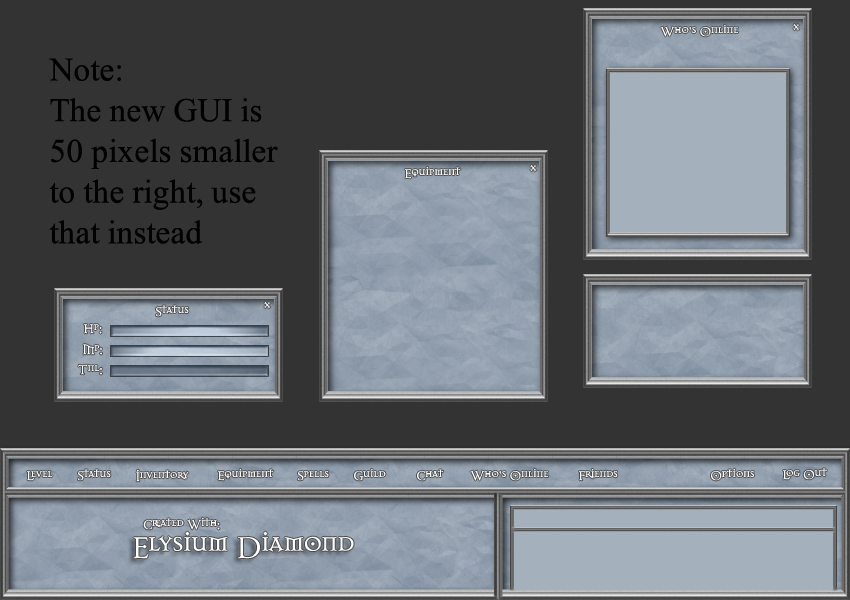
<style>
.page{position:relative;width:850px;height:600px;background:#333333}
.page>*{position:absolute;margin:0}
.t1{font:14px "Dark11";color:#ffffff}
.t2{font:33.2px/40.7px "TimesNewRomanPSMT";color:#000000}
.t3{font:33.2px "Dark11";color:#ffffff}
</style>
<div class="page">
<p class="t1" style="left:660px;top:24px;width:79px;height:13px">Who’s Online</p>
<p class="t1" style="left:793px;top:23px;width:7px;height:8px">x</p>
<p class="t2" style="left:49px;top:58px;width:229px;height:186px">Note:<br>The new GUI is<br>50 pixels smaller<br>to the right, use<br>that instead</p>
<p class="t1" style="left:405px;top:166px;width:56px;height:13px">Equipment</p>
<p class="t1" style="left:530px;top:164px;width:7px;height:8px">x</p>
<p class="t1" style="left:156px;top:305px;width:33px;height:12px">Status</p>
<p class="t1" style="left:264px;top:301px;width:7px;height:8px">x</p>
<p class="t1" style="left:84px;top:324px;width:18px;height:10px">Hp:</p>
<p class="t1" style="left:83px;top:344px;width:19px;height:11px">Mp:</p>
<p class="t1" style="left:78px;top:364px;width:24px;height:11px">Tnl:</p>
<p class="t1" style="left:27px;top:470px;width:26px;height:11px">Level</p>
<p class="t1" style="left:78px;top:469px;width:33px;height:12px">Status</p>
<p class="t1" style="left:136px;top:469px;width:53px;height:13px">Inventory</p>
<p class="t1" style="left:218px;top:468px;width:56px;height:13px">Equipment</p>
<p class="t1" style="left:298px;top:471px;width:31px;height:10px">Spells</p>
<p class="t1" style="left:354px;top:468px;width:32px;height:13px">Guild</p>
<p class="t1" style="left:417px;top:469px;width:27px;height:12px">Chat</p>
<p class="t1" style="left:470px;top:468px;width:79px;height:13px">Who’s Online</p>
<p class="t1" style="left:579px;top:468px;width:39px;height:13px">Friends</p>
<p class="t1" style="left:711px;top:468px;width:43px;height:13px">Options</p>
<p class="t1" style="left:783px;top:468px;width:44px;height:12px">Log Out</p>
<p class="t1" style="left:143px;top:517px;width:77px;height:13px">Created With:</p>
<p class="t3" style="left:133px;top:531px;width:221px;height:28px">Elysium Diamond</p>
</div>
